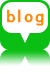
<style>
.page{position:relative;width:50px;height:74px;background:#ffffff}
.page>*{position:absolute;margin:0}
.t1{font:18px "HoonPinkpungchaR";letter-spacing:0.1em;color:#ff8a00}
</style>
<div class="page">
<p class="t1" style="left:7px;top:9px;width:37px;height:17px">blog</p>
</div>
